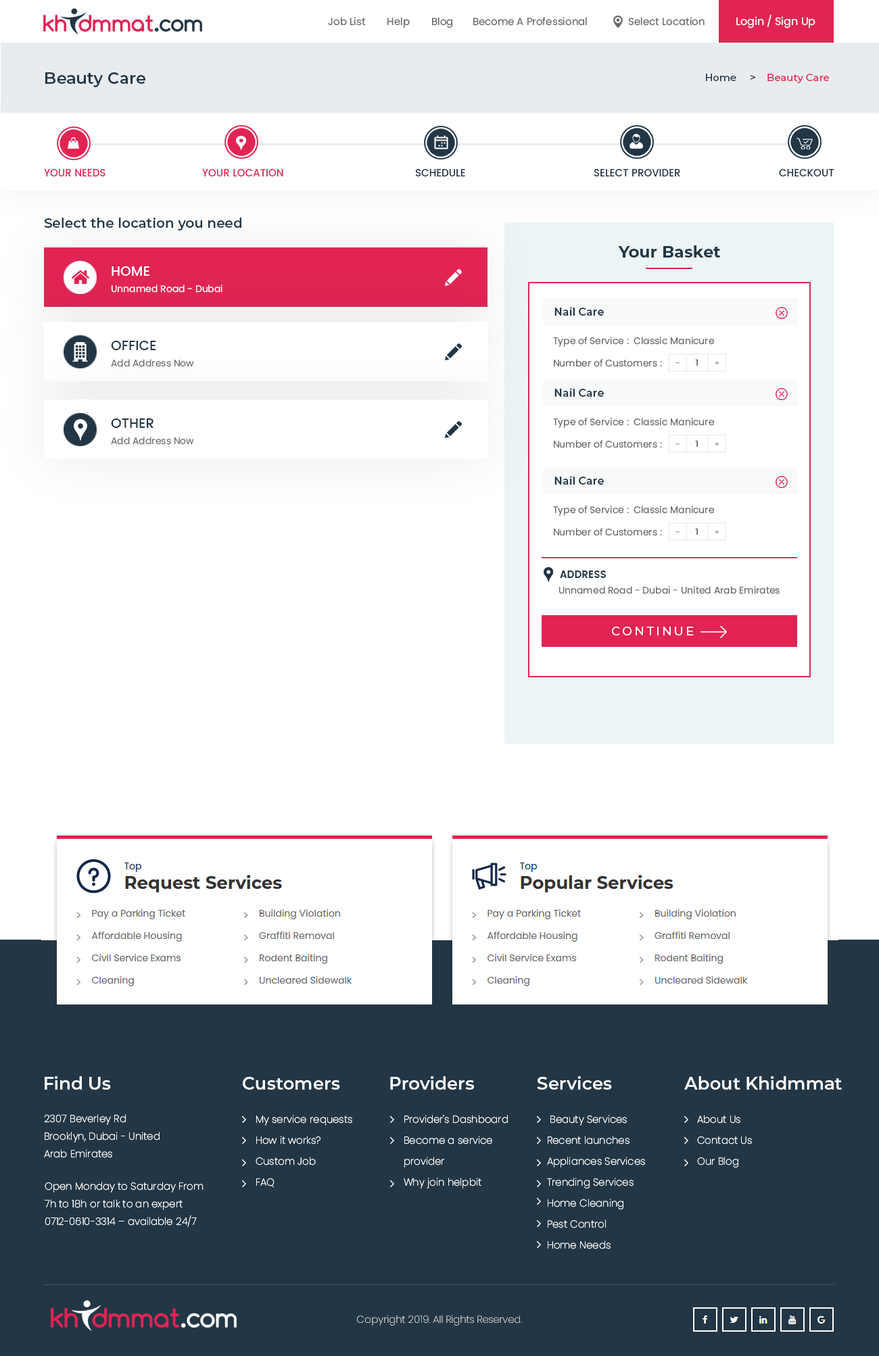
<style>
.page{position:relative;width:879px;height:1356px;background:#ffffff}
.page>*{position:absolute;margin:0}
.t1{font:10.1px "Poppins-Regular";color:#666666}
.t2{font:9.5px "Poppins-Regular";color:#666666}
.t3{font:10.8px "Poppins-Regular";color:#ffffff}
.t4{font:16.2px "Montserrat-SemiBold";color:#223645}
.t5{font:10.1px "Montserrat-Medium";color:#e12454}
.t6{font:10.1px "Montserrat-Medium";color:#05315e}
.t7{font:10.1px "Montserrat-Medium";color:#223645}
.t8{font:10.1px "Poppins-Medium";color:#e12454;text-transform:uppercase}
.t9{font:10.1px "Poppins-Medium";color:#223645;text-transform:uppercase}
.t10{font:13.5px "Montserrat-SemiBold";color:#213544}
.t11{font:16.2px "Montserrat-Bold";color:#223645}
.t12{font:13.5px "Poppins-Medium";color:#ffffff;text-transform:uppercase}
.t13{font:9.5px "Poppins-Regular";color:#ffffff}
.t14{font:10.8px "Montserrat-SemiBold";color:#223645}
.t15{font:13.5px "Poppins-Medium";color:#223645;text-transform:uppercase}
.t16{font:9.5px "Poppins-Regular";color:#6c6e70}
.t17{font:10.1px "Poppins-SemiBold";color:#213544;text-transform:uppercase}
.t18{font:12.2px "Montserrat-Medium";letter-spacing:0.18em;color:#ffffff;text-transform:uppercase}
.t19{font:17.6px "Montserrat-SemiBold";color:#ffffff}
.t20{font:10.1px/17.6px "Poppins-ExtraLight";color:#ffffff}
.t21{font:10.1px/21px "Poppins-ExtraLight";color:#ffffff}
.t22{font:10.1px "Poppins-ExtraLight"}
</style>
<div class="page">
<p class="t1" style="left:328px;top:14px;width:488px;height:14px"><span class="t2">       </span> Job List        Help        Blog       Become A Professional               Select Location            <span class="t3">Login / Sign Up</span></p>
<p class="t4" style="left:45px;top:72px;width:100px;height:15px">Beauty Care</p>
<p class="t5" style="left:706px;top:74px;width:123px;height:9px"><span class="t6">    </span><span class="t7">Home     &gt;    </span>Beauty Care</p>
<p class="t8" style="left:44px;top:169px;width:61px;height:7px">Your Needs</p>
<p class="t8" style="left:202px;top:169px;width:81px;height:7px">Your Location</p>
<p class="t9" style="left:415px;top:169px;width:50px;height:7px">Schedule</p>
<p class="t9" style="left:594px;top:169px;width:86px;height:7px">Select Provider</p>
<p class="t9" style="left:779px;top:169px;width:55px;height:7px">Checkout</p>
<p class="t10" style="left:44px;top:218px;width:197px;height:13px">Select the location you need</p>
<p class="t11" style="left:618px;top:245px;width:102px;height:13px">Your Basket</p>
<p class="t12" style="left:112px;top:266px;width:37px;height:10px">Home</p>
<p class="t13" style="left:111px;top:285px;width:111px;height:8px">Unnamed Road - Dubai</p>
<p class="t14" style="left:554px;top:307px;width:50px;height:9px">Nail Care</p>
<p class="t15" style="left:111px;top:341px;width:45px;height:9px">Office</p>
<p class="t2" style="left:553px;top:337px;width:162px;height:10px">Type of Service :  Classic Manicure</p>
<p class="t16" style="left:111px;top:359px;width:83px;height:8px">Add Address Now</p>
<p class="t2" style="left:554px;top:359px;width:108px;height:8px">Number of Customers :</p>
<p class="t14" style="left:554px;top:388px;width:50px;height:9px">Nail Care</p>
<p class="t15" style="left:111px;top:419px;width:42px;height:9px">Other</p>
<p class="t2" style="left:553px;top:418px;width:162px;height:10px">Type of Service :  Classic Manicure</p>
<p class="t16" style="left:111px;top:437px;width:83px;height:8px">Add Address Now</p>
<p class="t2" style="left:554px;top:440px;width:108px;height:8px">Number of Customers :</p>
<p class="t14" style="left:554px;top:476px;width:50px;height:9px">Nail Care</p>
<p class="t2" style="left:553px;top:506px;width:162px;height:10px">Type of Service :  Classic Manicure</p>
<p class="t2" style="left:554px;top:528px;width:108px;height:8px">Number of Customers :</p>
<p class="t17" style="left:560px;top:571px;width:46px;height:7px">Address</p>
<p class="t2" style="left:559px;top:586px;width:221px;height:8px">Unnamed Road - Dubai - United Arab Emirates</p>
<p class="t18" style="left:612px;top:627px;width:82px;height:9px">Continue</p>
<p class="t19" style="left:45px;top:1077px;width:66px;height:13px">Find Us</p>
<p class="t19" style="left:243px;top:1077px;width:97px;height:13px">Customers</p>
<p class="t19" style="left:390px;top:1077px;width:84px;height:13px">Providers</p>
<p class="t19" style="left:537px;top:1077px;width:75px;height:13px">Services</p>
<p class="t19" style="left:684px;top:1077px;width:158px;height:13px">About Khidmmat</p>
<p class="t20" style="left:44px;top:1114px;width:116px;height:44px">2307 Beverley Rd<br>Brooklyn, Dubai - United Arab Emirates</p>
<p class="t21" style="left:256px;top:1115px;width:96px;height:73px">My service requests<br>    How it works?<br>    Custom Job<br>    FAQ</p>
<p class="t21" style="left:404px;top:1115px;width:104px;height:74px">Provider's Dashboard<br>    Become a service <br>    provider<br>    Why join helpbit</p>
<p class="t21" style="left:547px;top:1115px;width:98px;height:135px">Beauty Services <br>Recent launches <br>Appliances Services Trending Services <br>Home Cleaning <br>Pest Control <br>Home Needs</p>
<p class="t21" style="left:697px;top:1115px;width:55px;height:53px">About Us<br> Contact Us<br> Our Blog</p>
<p class="t20" style="left:45px;top:1182px;width:159px;height:45px">Open Monday to Saturday From 7h to 18h or talk to an expert 0712-0610-3314 – available 24/7</p>
<p class="t22" style="left:357px;top:1315px;width:165px;height:11px">Copyright 2019. All Rights Reserved.</p>
</div>
